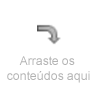
<style>
.page{position:relative;width:100px;height:100px;background:#ffffff}
.page>*{position:absolute;margin:0}
.t1{font:12px/10px "ArialMT";color:#b3b3b3}
</style>
<div class="page">
<p class="t1" style="left:7px;top:56px;width:83px;height:27px;text-align:center">Arraste os <br>conteúdos aqui</p>
</div>
